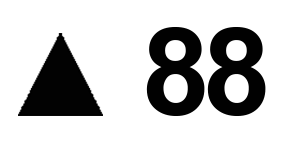
<style>
.page{position:relative;width:283px;height:142px;background:#ffffff}
.page>*{position:absolute;margin:0}
.t1{font:121.9px "Arial-BoldMT";letter-spacing:-0.053em;color:#010101}
</style>
<div class="page">
<p class="t1" style="left:146px;top:27px;width:120px;height:89px">88</p>
</div>
